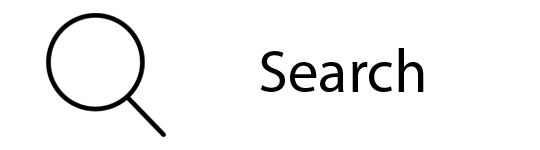
<style>
.page{position:relative;width:540px;height:150px;background:#ffffff}
.page>*{position:absolute;margin:0}
.t1{font:60.4px "MyriadPro-Regular";color:#000000}
</style>
<div class="page">
<p class="t1" style="left:261px;top:48px;width:163px;height:44px">Search</p>
</div>
